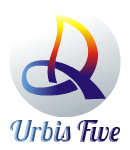
<style>
.page{position:relative;width:130px;height:150px;background:#ffffff}
.page>*{position:absolute;margin:0}
.t1{font:28.7px "Lobster-Regular"}
</style>
<div class="page">
<p class="t1" style="left:9px;top:120px;width:111px;height:22px">Urbis Five</p>
</div>
